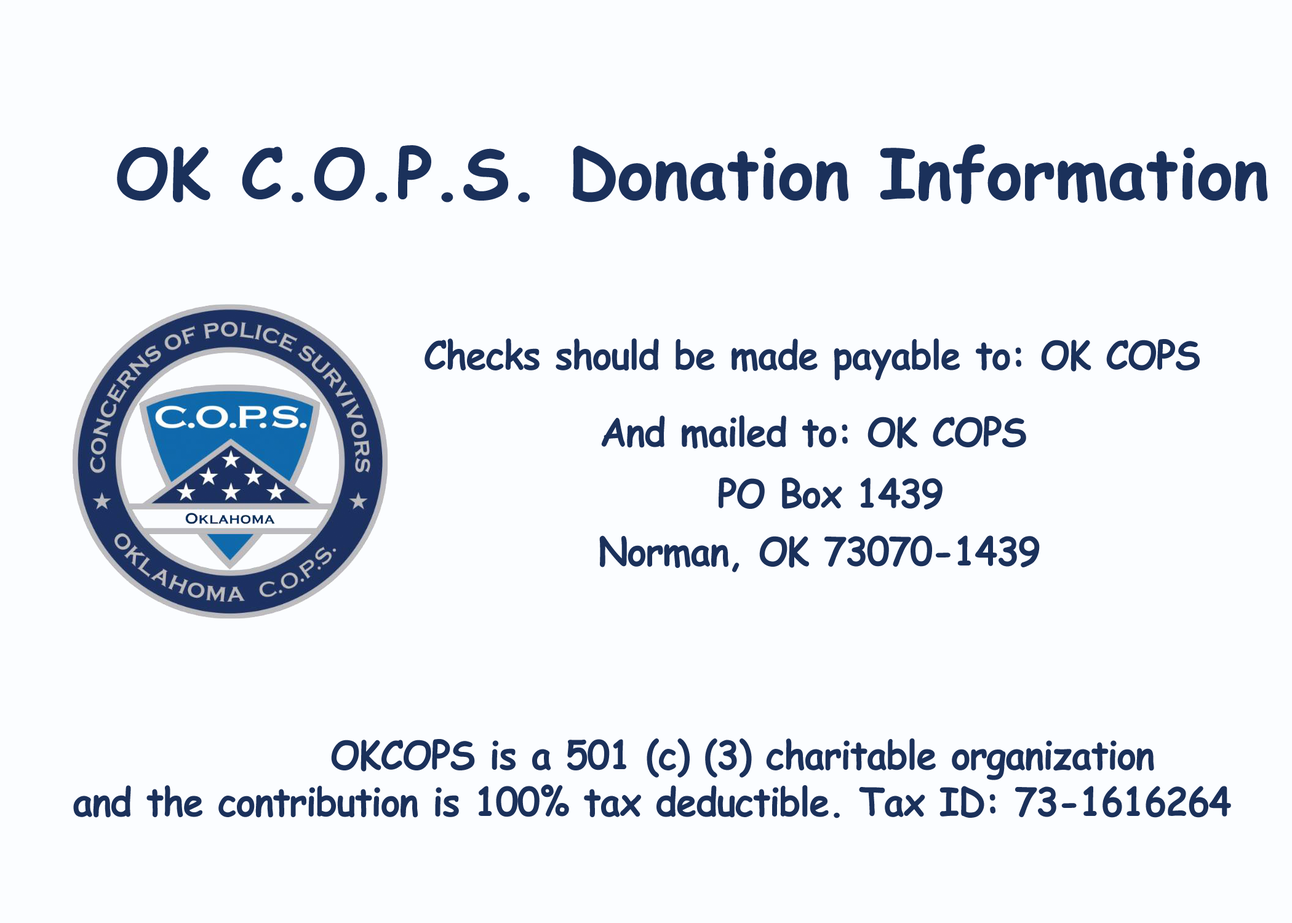
<style>
.page{position:relative;width:1292px;height:923px;background:#fbfdff}
.page>*{position:absolute;margin:0}
.t1{font:68.8px "ComicSansMS-Bold";letter-spacing:-0.025em;color:#1b315b;font-weight:bold}
.t2{font:39.2px "ComicSansMS-Bold";letter-spacing:-0.025em;color:#1b315b;scale:0.94 1}
</style>
<div class="page">
<p class="t1" style="left:117px;top:144px;width:1151px;height:60px">OK C.O.P.S. Donation Information</p>
<p class="t2" style="left:425px;top:338px;width:775px;height:42px">Checks should be made payable to: OK COPS</p>
<p class="t2" style="left:601px;top:415px;width:425px;height:34px">And mailed to: OK COPS</p>
<p class="t2" style="left:719px;top:477px;width:224px;height:32px">PO Box 1439</p>
<p class="t2" style="left:599px;top:535px;width:441px;height:37px">Norman, OK 73070-1439</p>
<p class="t2" style="left:331px;top:738px;width:823px;height:42px">OKCOPS is a 501 (c) (3) charitable organization</p>
<p class="t2" style="left:73px;top:784px;width:1158px;height:34px">and the contribution is 100% tax deductible. Tax ID: 73-1616264</p>
</div>
